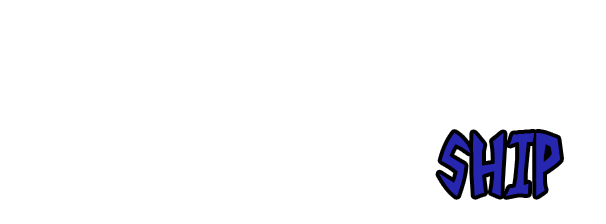
<style>
.page{position:relative;width:606px;height:224px;background:#ffffff}
.page>*{position:absolute;margin:0}
.t1{font:85.3px "INVADER";color:#2626ae;text-transform:uppercase}
</style>
<div class="page">
<p class="t1" style="left:439px;top:133px;width:121px;height:63px">Ship</p>
</div>
